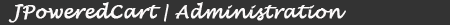
<style>
.page{position:relative;width:450px;height:25px;background:#333333}
.page>*{position:absolute;margin:0}
.t1{font:18px "LucidaHandwriting-Italic";color:#fcfafa;font-weight:bold}
</style>
<div class="page">
<p class="t1" style="left:8px;top:2px;width:338px;height:21px">JPoweredCart | Administration</p>
</div>
